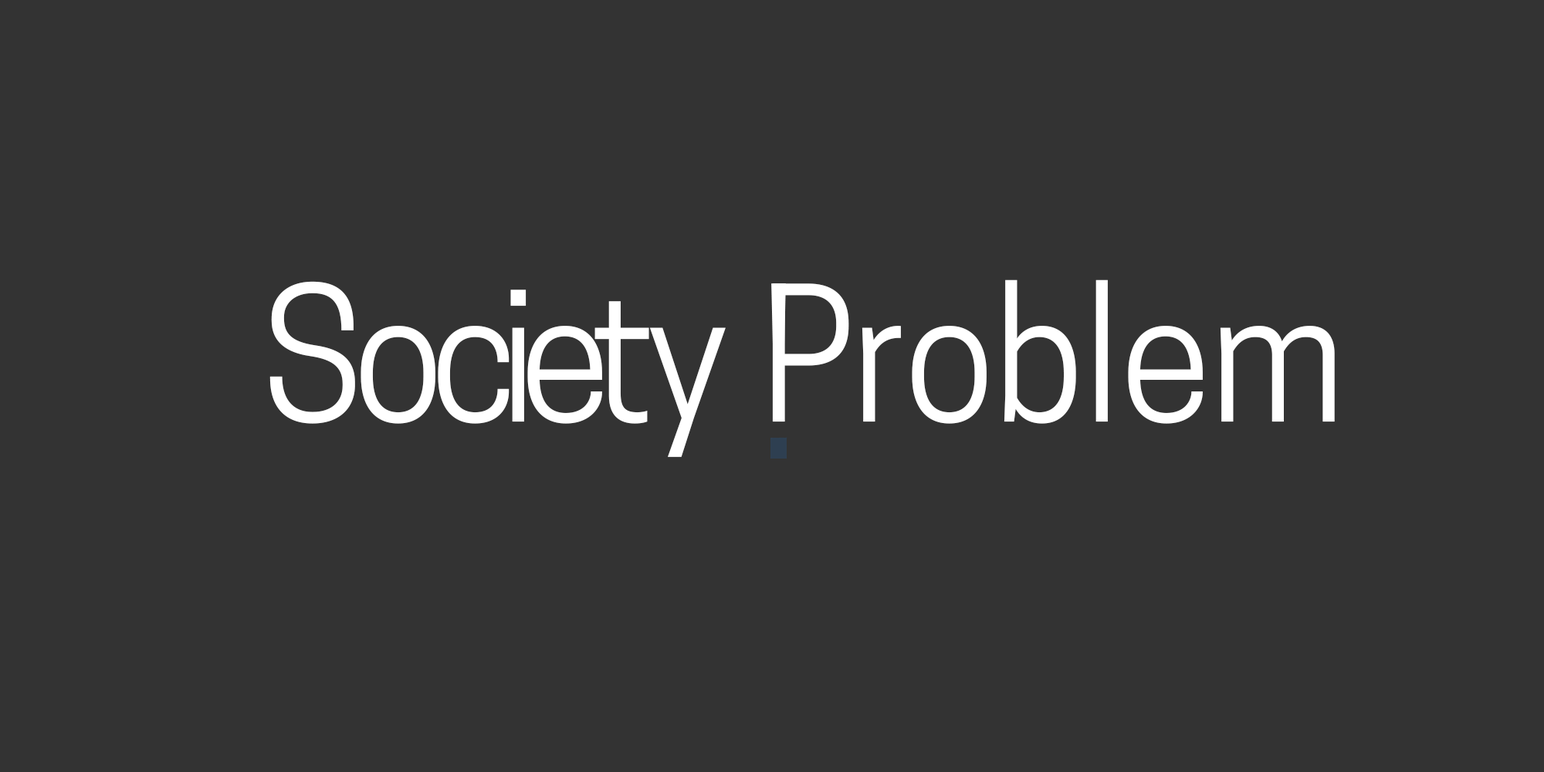
<style>
.page{position:relative;width:1544px;height:772px;background:#333333}
.page>*{position:absolute;margin:0}
.t1{font:176.8px "CooperHewitt-Book";color:#ffffff;scale:0.94 1}
</style>
<div class="page">
<p class="t1" style="left:269px;top:280px;width:1066px;height:177px">Society Problem</p>
</div>
